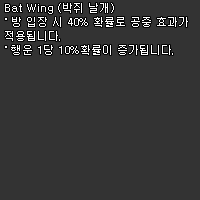
<style>
.page{position:relative;width:200px;height:200px;background:#333333}
.page>*{position:absolute;margin:0}
.t1{font:11px/14px "Dotum";color:#ffffff}
</style>
<div class="page">
<p class="t1" style="left:5px;top:3px;width:183px;height:52px">Bat Wing (박쥐 날개)<br>˚ 방 입장 시 40% 확률로 공중 효과가<br>적용됩니다.<br>˚ 행운 1당 10%확률이 증가됩니다.</p>
</div>
